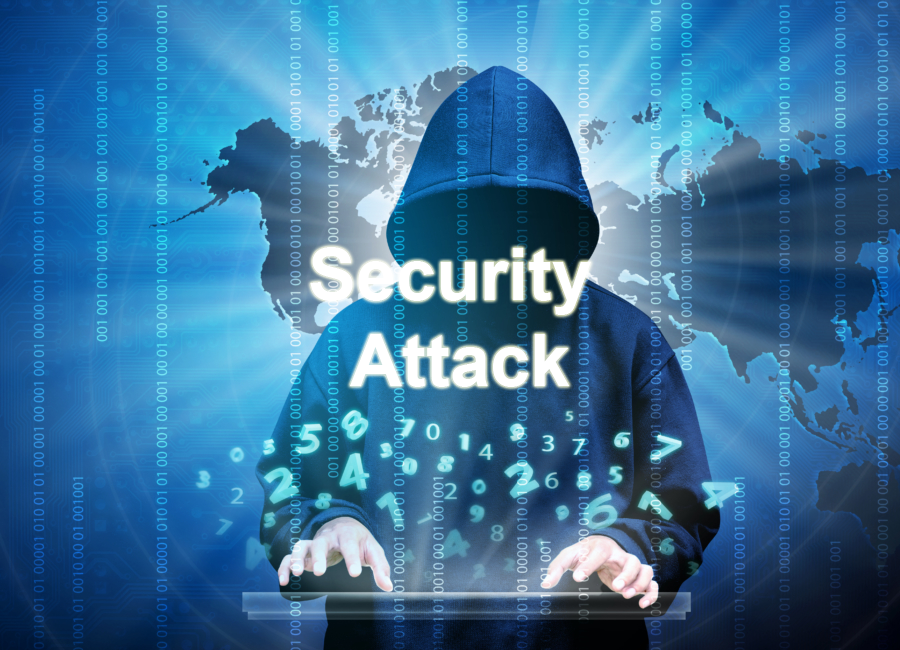
<style>
.page{position:relative;width:900px;height:650px}
.page>*{position:absolute;margin:0}
.t1{font:72px "Arial-BoldMT";color:#ffffff}
</style>
<div class="page">
<p class="t1" style="left:310px;top:247px;width:281px;height:140px;text-align:center">Security <br>Attack</p>
</div>
